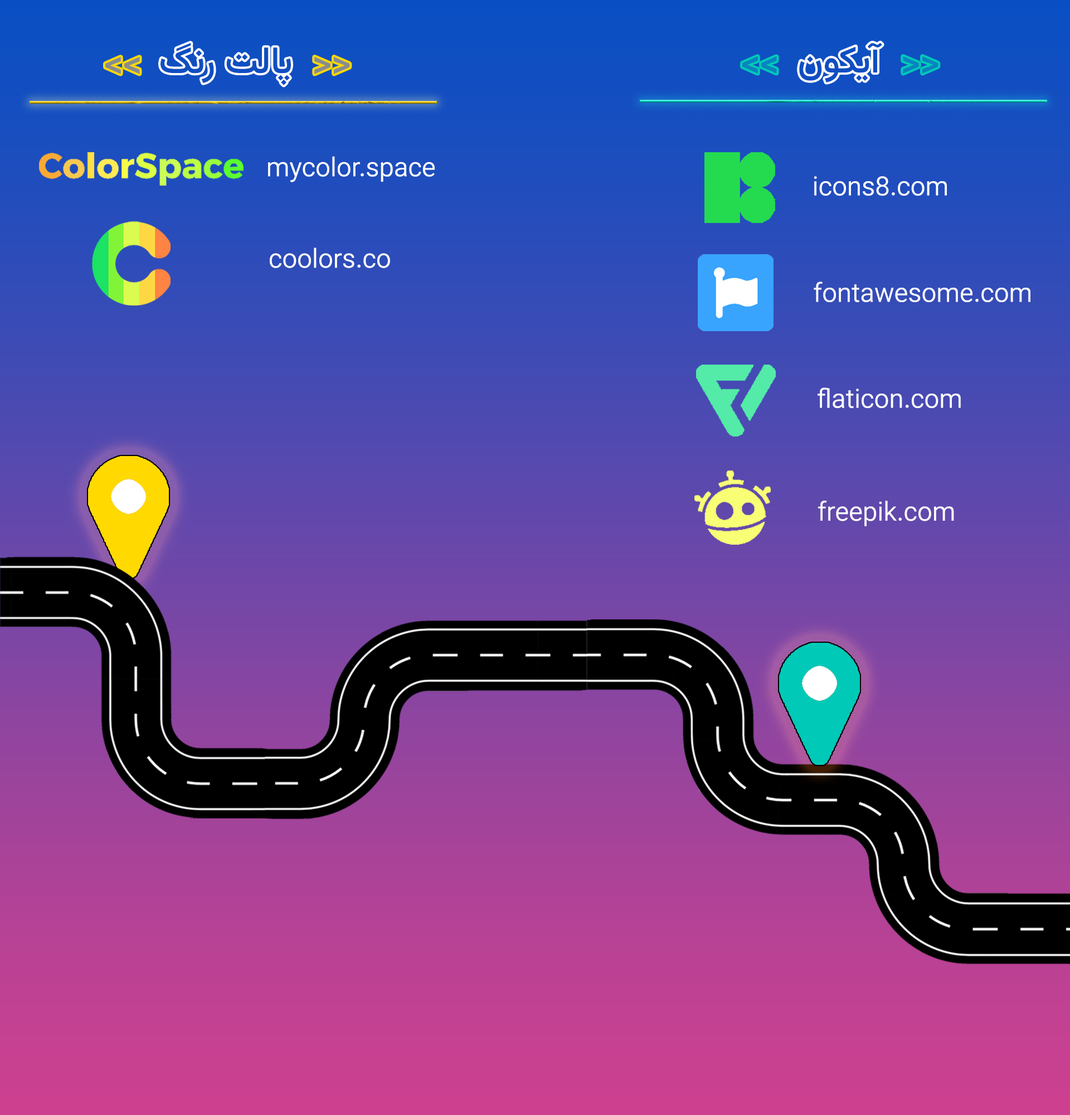
<style>
.page{position:relative;width:1070px;height:1115px}
.page>*{position:absolute;margin:0}
.t1{font:37.2px "Vazirmatn-Medium";color:#104ec1}
.t2{font:37.2px "Vazirmatn-Medium";color:#898b8f}
.t3{font:37.2px "Vazirmatn-Medium";color:#0983be}
.t4{font:26.4px "Vazirmatn-Light";color:#fcfefc}
.t5{font:26.4px "Vazirmatn-Light";color:#fdfefe}
.t6{font:26.4px "Vazirmatn-Light";color:#fcfcfc}
</style>
<div class="page">
<p class="t1" style="left:799px;top:43px;width:83px;height:39px">آیکون</p>
<p class="t2" style="left:105px;top:57px;width:35px;height:17px">&lt;&lt;</p>
<p class="t2" style="left:314px;top:57px;width:36px;height:17px">&gt;&gt;</p>
<p class="t3" style="left:742px;top:56px;width:35px;height:18px">&lt;&lt;</p>
<p class="t3" style="left:903px;top:56px;width:35px;height:18px">&gt;&gt;</p>
<p class="t4" style="left:268px;top:156px;width:167px;height:26px">mycolor.space</p>
<p class="t5" style="left:814px;top:176px;width:133px;height:20px">icons8.com</p>
<p class="t4" style="left:270px;top:247px;width:120px;height:21px">coolors.co</p>
<p class="t6" style="left:814px;top:281px;width:216px;height:21px">fontawesome.com</p>
<p class="t5" style="left:817px;top:387px;width:144px;height:21px">flaticon.com</p>
<p class="t5" style="left:818px;top:500px;width:136px;height:26px">freepik.com</p>
</div>
